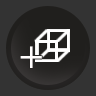
<style>
.page{position:relative;width:96px;height:96px;background:#333333}
.page>*{position:absolute;margin:0}
.t1{font:40.2px "MyriadPro-Regular";color:#fffdfd}
</style>
<div class="page">
<p class="t1" style="left:20px;top:46px;width:22px;height:22px">+</p>
</div>
